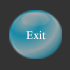
<style>
.page{position:relative;width:70px;height:70px;background:#333333}
.page>*{position:absolute;margin:0}
.t1{font:11.2px "CalistoMT";color:#ffffff}
</style>
<div class="page">
<p class="t1" style="left:26px;top:31px;width:20px;height:9px">Exit</p>
</div>
